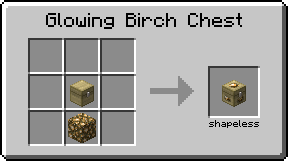
<style>
.page{position:relative;width:288px;height:161px;background:#c6c6c6}
.page>*{position:absolute;margin:0}
.t1{font:16px "Minecraftia";color:#000000}
.t2{font:8px "Minecraftia";color:#000000}
</style>
<div class="page">
<p class="t1" style="left:46px;top:13px;width:196px;height:16px">Glowing Birch Chest</p>
<p class="t2" style="left:209px;top:120px;width:50px;height:8px">shapeless</p>
</div>
